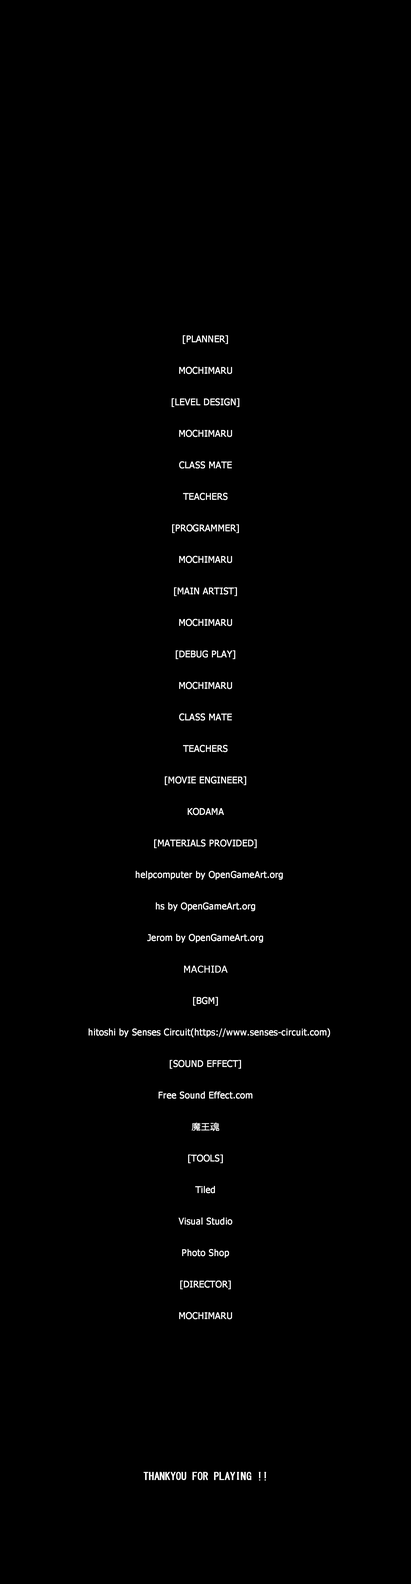
<style>
.page{position:relative;width:411px;height:1584px;background:#000000}
.page>*{position:absolute;margin:0}
.t1{font:9px "Tahoma";color:#ffffff;font-weight:bold}
.t2{font:9px "Meiryo";color:#ffffff;font-weight:bold}
</style>
<div class="page">
<p class="t1" style="left:89px;top:335px;width:241px;height:984px;text-align:center">[PLANNER]<br><br>MOCHIMARU<br><br>[LEVEL DESIGN]<br> <br>MOCHIMARU<br><br>CLASS MATE<br><br>TEACHERS<br><br>[PROGRAMMER]<br><br>MOCHIMARU<br><br>[MAIN ARTIST]<br> <br>MOCHIMARU<br><br>[DEBUG PLAY]<br><br>MOCHIMARU<br><br>CLASS MATE<br><br>TEACHERS<br><br>[MOVIE ENGINEER]<br><br>KODAMA<br><br>[MATERIALS PROVIDED]<br><br> helpcomputer by OpenGameArt.org<br><br>hs by OpenGameArt.org<br><br>Jerom by OpenGameArt.org<span class="t2"><br><br>MACHIDA<br></span><br>[BGM]<br><br> hitoshi by Senses Circuit(https://www.senses-circuit.com)<br><br>[SOUND EFFECT]<br><br>Free Sound Effect.com<br><br><span class="t2">魔王魂</span><br><br>[TOOLS]<br><br>Tiled<br><br>Visual Studio<br><br>Photo Shop<br><br>[DIRECTOR]<br><br>MOCHIMARU</p>
</div>
